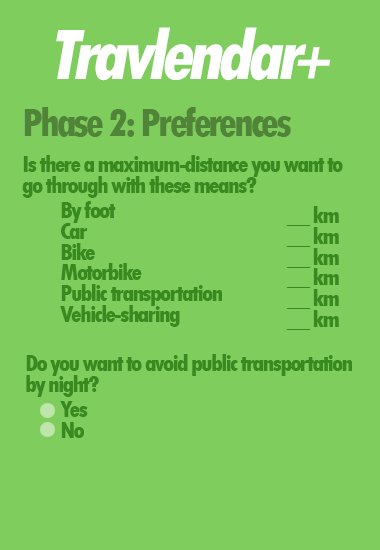
<style>
.page{position:relative;width:380px;height:550px;background:#7fcd5c}
.page>*{position:absolute;margin:0}
.t1{font:75px "TwCenMT-CondensedExtraBold";letter-spacing:-0.075em;color:#ffffff;font-style:italic}
.t2{font:58.3px "TwCenMT-CondensedExtraBold";letter-spacing:-0.075em;color:#ffffff;font-style:italic}
.t3{font:41.7px "TwCenMT-CondensedExtraBold";letter-spacing:-0.075em;color:#508439}
.t4{font:25px/16.7px "TwCenMT-CondensedExtraBold";letter-spacing:-0.075em;color:#378920}
.t5{font:25px/20.8px "TwCenMT-CondensedExtraBold";letter-spacing:-0.075em;color:#378920}
</style>
<div class="page">
<p class="t1" style="left:56px;top:27px;width:251px;height:54px">Travlendar</p>
<p class="t2" style="left:297px;top:47px;width:34px;height:32px">+</p>
<p class="t3" style="left:24px;top:107px;width:267px;height:30px">Phase 2: Preferences</p>
<p class="t4" style="left:22px;top:155px;width:321px;height:43px">Is there a maximum-distance you want to<br><span class="t5">go through with these means?</span></p>
<p class="t5" style="left:60px;top:201px;width:162px;height:126px">By foot<br>Car<br>Bike<br>Motorbike<br>Public transportation<br>Vehicle-sharing</p>
<p class="t5" style="left:286px;top:206px;width:53px;height:124px">__ km<br>__ km<br>__ km<br>__ km<br>__ km<br>__ km</p>
<p class="t5" style="left:26px;top:354px;width:326px;height:43px">Do you want to avoid public transportation<br>by night?</p>
<p class="t5" style="left:60px;top:401px;width:28px;height:37px">Yes<br>No</p>
</div>
